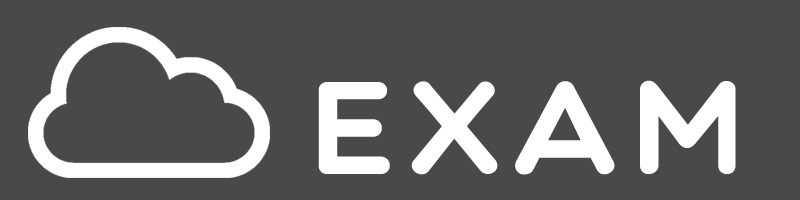
<style>
.page{position:relative;width:800px;height:200px;background:#4a4848}
.page>*{position:absolute;margin:0}
.t1{font:133px "Multicolore";letter-spacing:0.1em;color:#ffffff;scale:1.05 1}
</style>
<div class="page">
<p class="t1" style="left:318px;top:80px;width:418px;height:95px">EXAM</p>
</div>
